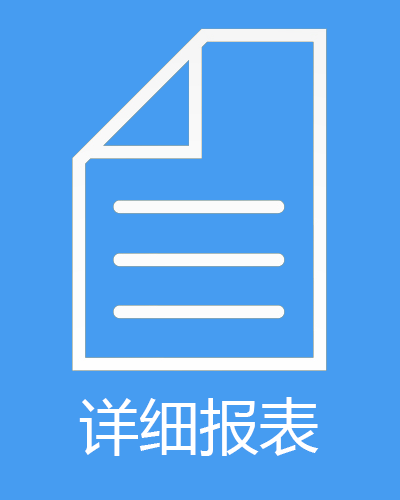
<style>
.page{position:relative;width:400px;height:500px;background:#469cf1}
.page>*{position:absolute;margin:0}
.t1{font:60px "MicrosoftYaHei";color:#ffffff}
</style>
<div class="page">
<p class="t1" style="left:79px;top:397px;width:240px;height:59px">详细报表</p>
</div>
